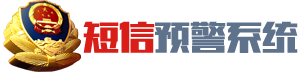
<style>
.page{position:relative;width:300px;height:75px;background:#ffffff}
.page>*{position:absolute;margin:0}
.t1{font:36px "Tensentype-ChaoHeiJ";color:#d91e18}
.t2{font:36px "Tensentype-ChaoHeiJ";color:#5e738b}
</style>
<div class="page">
<p class="t1" style="left:83px;top:21px;width:72px;height:32px">短信</p>
<p class="t2" style="left:155px;top:21px;width:143px;height:32px">预警系统</p>
</div>
